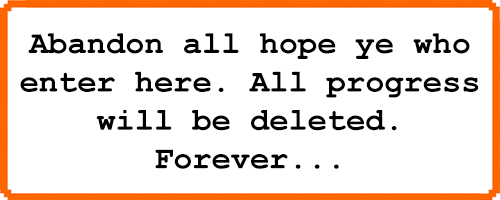
<style>
.page{position:relative;width:500px;height:200px;background:#ffffff}
.page>*{position:absolute;margin:0}
.t1{font:32px "CourierNewPS-BoldMT";color:#000000}
</style>
<div class="page">
<p class="t1" style="left:20px;top:33px;width:459px;height:136px;text-align:center">Abandon all hope ye who<br>enter here. All progress<br>will be deleted.<br>Forever...</p>
</div>
